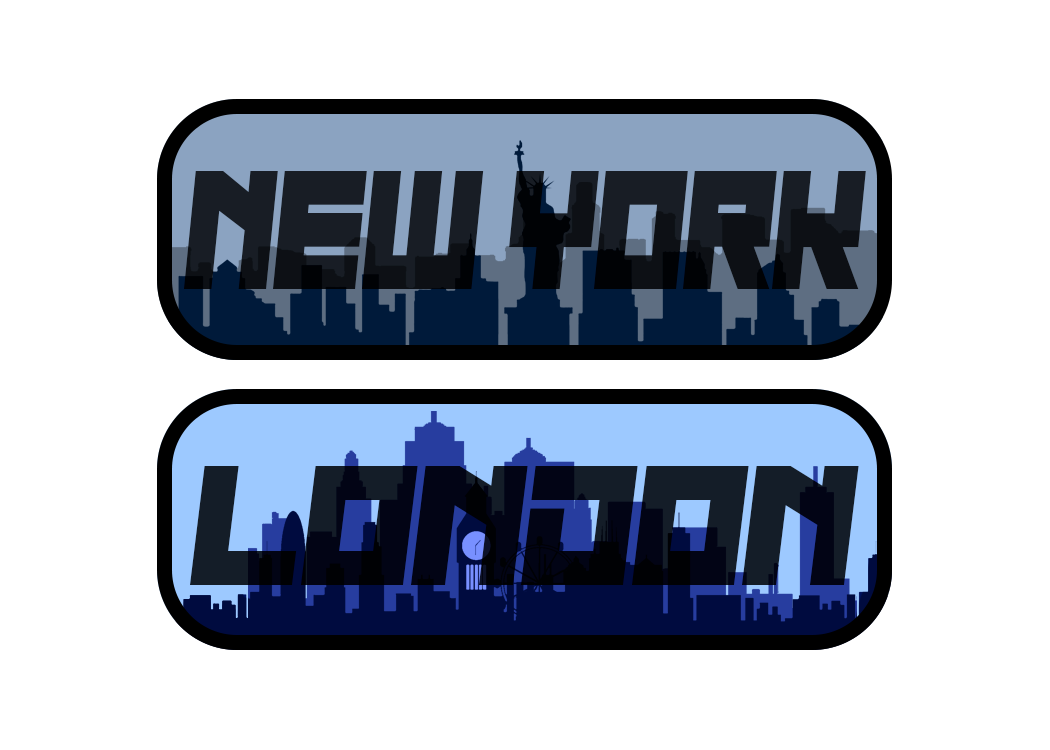
<style>
.page{position:relative;width:1050px;height:750px;background:#ffffff}
.page>*{position:absolute;margin:0}
.t1{font:173.5px "NauSea";color:#181d25;scale:0.81 1}
.t2{font:173.8px "NauSea"}
</style>
<div class="page">
<p class="t1" style="left:184px;top:171px;width:682px;height:118px">new york</p>
<p class="t2" style="left:190px;top:466px;width:669px;height:119px">london</p>
</div>
